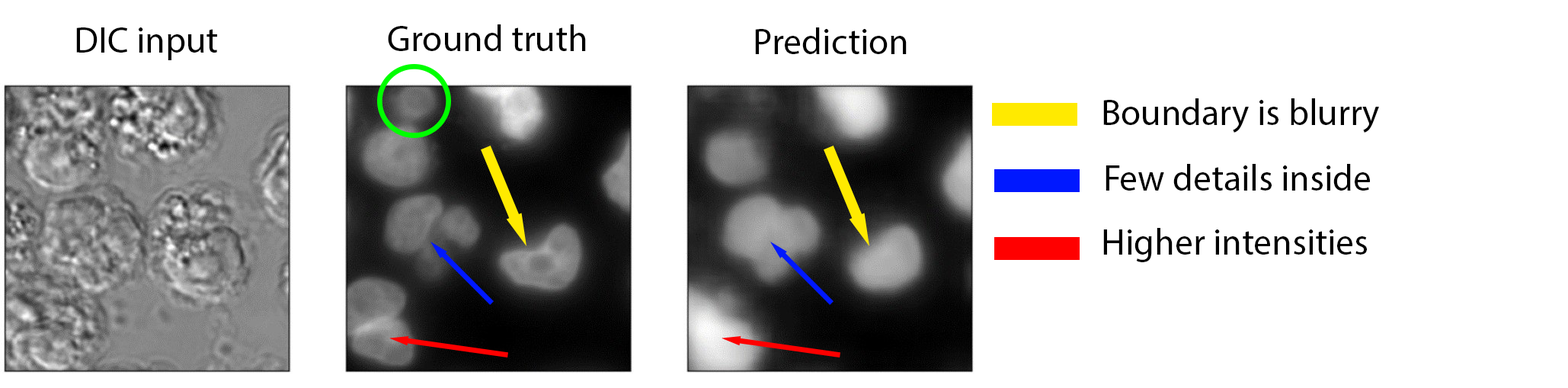
<style>
.page{position:relative;width:1568px;height:388px;background:#ffffff}
.page>*{position:absolute;margin:0}
.t1{font:36.6px "MyriadPro-Regular";color:#000000}
</style>
<div class="page">
<p class="t1" style="left:76px;top:27px;width:141px;height:33px">DIC input</p>
<p class="t1" style="left:388px;top:24px;width:198px;height:27px">Ground truth</p>
<p class="t1" style="left:755px;top:27px;width:152px;height:27px">Prediction</p>
<p class="t1" style="left:1103px;top:98px;width:276px;height:35px">Boundary is blurry</p>
<p class="t1" style="left:1106px;top:164px;width:264px;height:26px">Few details inside</p>
<p class="t1" style="left:1103px;top:228px;width:264px;height:34px">Higher intensities</p>
</div>
